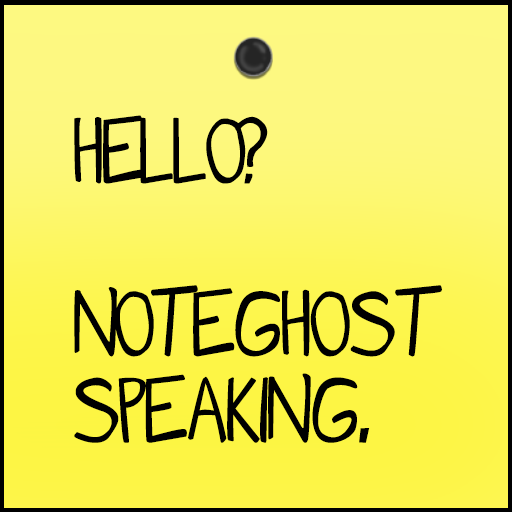
<style>
.page{position:relative;width:512px;height:512px}
.page>*{position:absolute;margin:0}
.t1{font:72px "Mangaspeak2";letter-spacing:-0.08em;color:#000000}
</style>
<div class="page">
<p class="t1" style="left:74px;top:115px;width:368px;height:328px">Hello?<br><br>Noteghost<br>speaking.</p>
</div>
